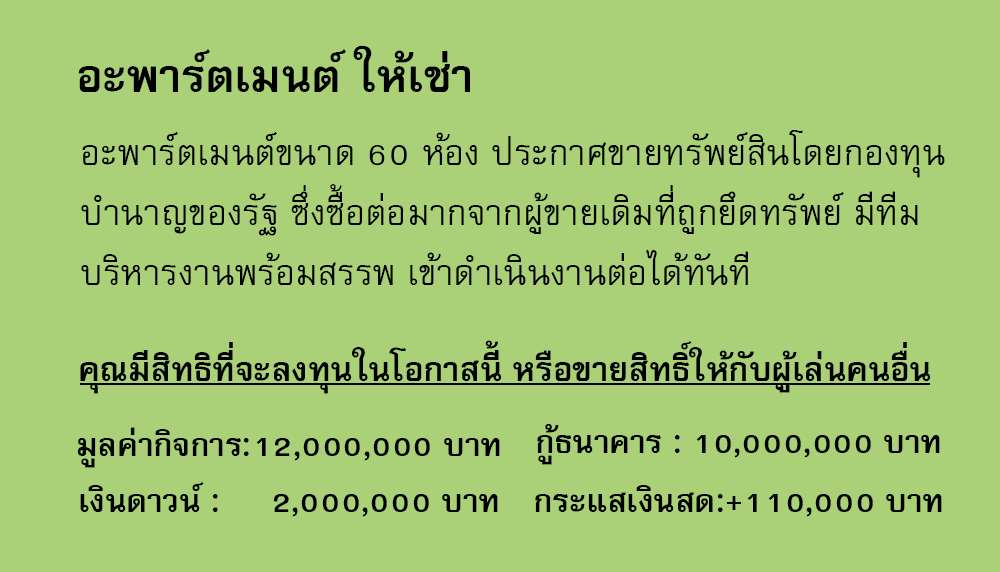
<style>
.page{position:relative;width:1000px;height:572px;background:#aad178}
.page>*{position:absolute;margin:0}
.t1{font:64px "FreesiaUPCBold";color:#000000}
.t2{font:50px/60px "FreesiaUPC";color:#000000}
.t3{font:47px "FreesiaUPCBold";color:#000000}
.t4{font:45px "FreesiaUPCBold";color:#000000}
</style>
<div class="page">
<p class="t1" style="left:78px;top:45px;width:392px;height:47px">อะพาร์ตเมนต์ ให้เช่า</p>
<p class="t2" style="left:81px;top:130px;width:864px;height:155px">อะพาร์ตเมนต์ขนาด 60 ห้อง ประกาศขายทรัพย์สินโดยกองทุน<br>บำนาญของรัฐ ซึ่งซื้อต่อมากจากผู้ขายเดิมที่ถูกยึดทรัพย์ มีทีม<br>บริหารงานพร้อมสรรพ เข้าดำเนินงานต่อได้ทันที</p>
<p class="t3" style="left:80px;top:340px;width:851px;height:54px">คุณมีสิทธิที่จะลงทุนในโอกาสนี้ หรือขายสิทธิ์ให้กับผู้เล่นคนอื่น</p>
<p class="t4" style="left:537px;top:424px;width:403px;height:41px">กู้ธนาคาร : 10,000,000 บาท</p>
<p class="t4" style="left:77px;top:427px;width:423px;height:41px">มูลค่ากิจการ:12,000,000 บาท</p>
<p class="t4" style="left:80px;top:481px;width:418px;height:36px">เงินดาวน์ :     2,000,000 บาท</p>
<p class="t4" style="left:535px;top:485px;width:407px;height:32px">กระแสเงินสด:+110,000 บาท</p>
</div>
